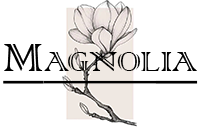
<style>
.page{position:relative;width:200px;height:127px;background:#ffffff}
.page>*{position:absolute;margin:0}
.t1{font:52px "ColonnaMT";color:#000000;font-variant:small-caps;text-decoration:underline}
</style>
<div class="page">
<p class="t1" style="left:3px;top:44px;width:195px;height:40px">Magnolia</p>
</div>
